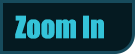
<style>
.page{position:relative;width:135px;height:54px;background:#051a21}
.page>*{position:absolute;margin:0}
.t1{font:28.2px "Impact";color:#34c3d9}
</style>
<div class="page">
<p class="t1" style="left:15px;top:15px;width:89px;height:24px">Zoom In</p>
</div>
